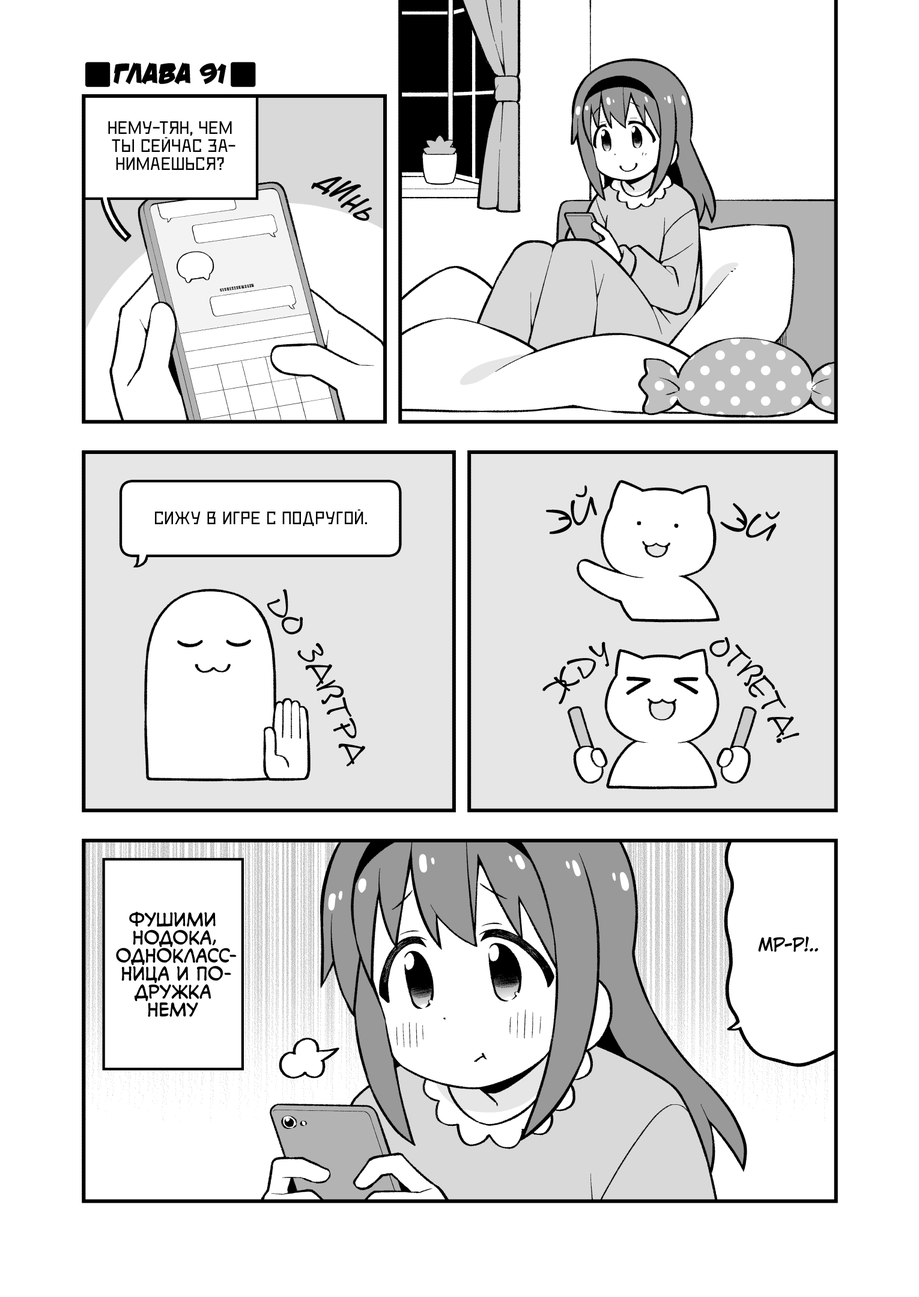
<style>
.page{position:relative;width:919px;height:1297px;background:#ffffff}
.page>*{position:absolute;margin:0}
.t1{font:28.8px "v_DamnNoisyKids";color:#000000;text-transform:uppercase}
.t2{font:18px "DeadMetroC";color:#000000;text-transform:uppercase}
.t3{font:27px "v_CCDearDiary";color:#000000;text-transform:uppercase}
.t4{font:28.8px "v_CCDearDiary";color:#000000;text-transform:uppercase}
.t5{font:25.2px "v_CCDearDiary";color:#000000;text-transform:uppercase}
.t6{font:23.4px "v_CCDearDiary";color:#000000;text-transform:uppercase}
.t7{font:39.6px "DSNote";color:#000000}
.t8{font:32.4px "DSNote";color:#000000;scale:0.9 1}
.t9{font:32.4px "DSNote";color:#000000;scale:0.8 1}
.t10{font:18px "v_CCMonologous";color:#000000;text-transform:uppercase}
.t11{font:18px "KuraiVoice2";color:#000000;text-transform:uppercase}
</style>
<div class="page">
<p class="t1" style="left:114px;top:62px;width:112px;height:23px">Глава 91</p>
<p class="t2" style="left:108px;top:121px;width:127px;height:49px;text-align:center">Нему-тян, чем<br>ты сейчас за-<br>нимаешься?</p>
<p class="t3" style="left:311px;top:177px;width:31px;height:18px;rotate:39deg">д</p>
<p class="t4" style="left:329px;top:180px;width:32px;height:22px;rotate:34deg">и</p>
<p class="t5" style="left:340px;top:195px;width:29px;height:18px;rotate:37deg">н</p>
<p class="t6" style="left:353px;top:207px;width:19px;height:14px;rotate:47deg">ь</p>
<p class="t7" style="left:546px;top:485px;width:51px;height:50px;rotate:-20deg">Эй</p>
<p class="t2" style="left:155px;top:509px;width:212px;height:17px">Сижу в игре с подругой.</p>
<p class="t7" style="left:720px;top:503px;width:60px;height:39px;rotate:23deg">Эй</p>
<p class="t8" style="left:267px;top:589px;width:98px;height:178px;rotate:64deg">До завтра</p>
<p class="t9" style="left:709px;top:637px;width:91px;height:107px;rotate:53deg">ответа!</p>
<p class="t9" style="left:542px;top:642px;width:67px;height:63px;rotate:-40deg">Жду</p>
<p class="t10" style="left:116px;top:912px;width:121px;height:106px;text-align:center">Фушими<br>Нодока,<br>однокласс-<br>ница и по-<br>дружка<br>Нему</p>
<p class="t11" style="left:758px;top:936px;width:60px;height:16px">Мр-р!..</p>
</div>
